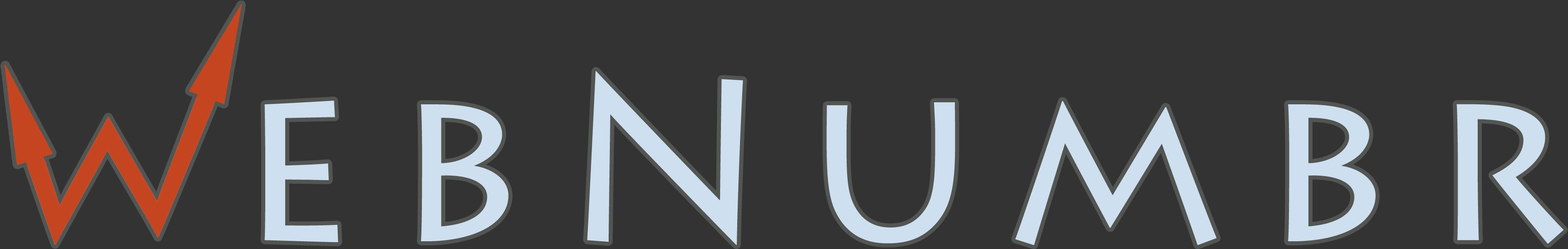
<style>
.page{position:relative;width:1568px;height:249px;background:#333333}
.page>*{position:absolute;margin:0}
.t1{font:227.8px "LithosPro-Regular";letter-spacing:0.16em;color:#cedfef}
.t2{font:210.3px "LithosPro-Regular";letter-spacing:0.16em;color:#c64521}
</style>
<div class="page">
<p class="t1" style="left:264px;top:71px;width:1300px;height:174px">ebNumbr</p>
<p class="t2" style="left:3px;top:87px;width:214px;height:158px">W</p>
<p class="t2" style="left:3px;top:87px;width:214px;height:158px">W</p>
</div>
